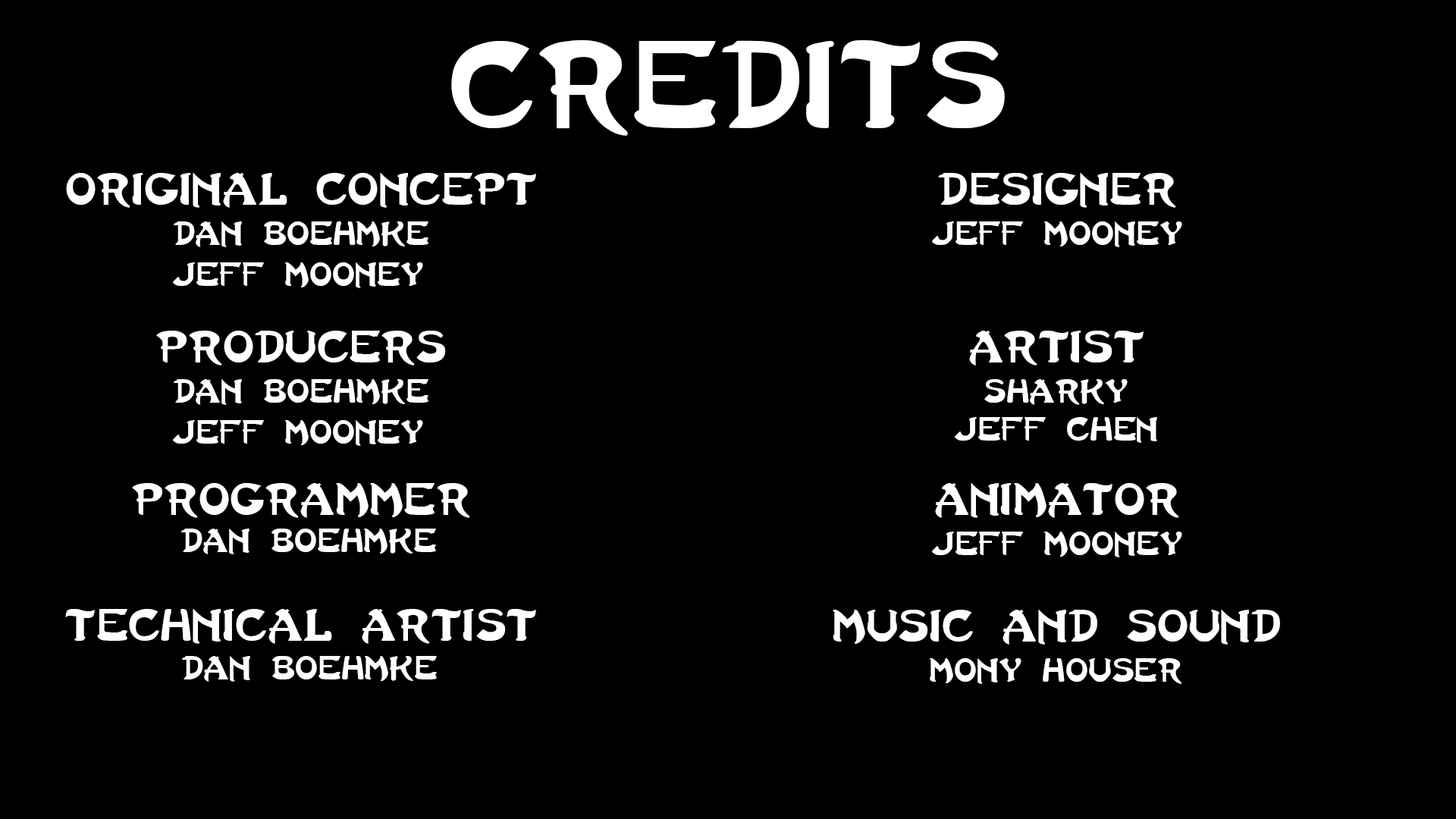
<style>
.page{position:relative;width:1456px;height:819px;background:#000000}
.page>*{position:absolute;margin:0}
.t1{font:94.8px "LastNinja";color:#ffffff}
.t2{font:34.8px "LastNinja";color:#ffffff}
.t3{font:25.3px "LastNinja";color:#ffffff}
</style>
<div class="page">
<p class="t1" style="left:451px;top:40px;width:554px;height:96px">Credits</p>
<p class="t2" style="left:66px;top:173px;width:470px;height:35px">Original Concept</p>
<p class="t2" style="left:938px;top:173px;width:238px;height:35px">Designer</p>
<p class="t3" style="left:174px;top:221px;width:254px;height:26px">Dan Boehmke</p>
<p class="t3" style="left:932px;top:221px;width:250px;height:26px">Jeff Mooney</p>
<p class="t3" style="left:173px;top:262px;width:250px;height:26px">Jeff Mooney</p>
<p class="t2" style="left:156px;top:331px;width:290px;height:35px">Producers</p>
<p class="t2" style="left:969px;top:331px;width:175px;height:35px">Artist</p>
<p class="t3" style="left:174px;top:379px;width:254px;height:26px">Dan Boehmke</p>
<p class="t3" style="left:984px;top:379px;width:144px;height:26px">Sharky</p>
<p class="t3" style="left:173px;top:420px;width:250px;height:26px">Jeff Mooney</p>
<p class="t3" style="left:955px;top:417px;width:202px;height:26px">Jeff Chen</p>
<p class="t2" style="left:132px;top:483px;width:338px;height:35px">Programmer</p>
<p class="t2" style="left:935px;top:483px;width:244px;height:35px">Animator</p>
<p class="t3" style="left:181px;top:529px;width:255px;height:25px">Dan Boehmke</p>
<p class="t3" style="left:932px;top:532px;width:250px;height:25px">Jeff Mooney</p>
<p class="t2" style="left:65px;top:609px;width:471px;height:35px">Technical Artist</p>
<p class="t2" style="left:833px;top:610px;width:447px;height:35px">Music and Sound</p>
<p class="t3" style="left:182px;top:656px;width:255px;height:26px">Dan Boehmke</p>
<p class="t3" style="left:930px;top:658px;width:252px;height:26px">Mony Houser</p>
</div>
